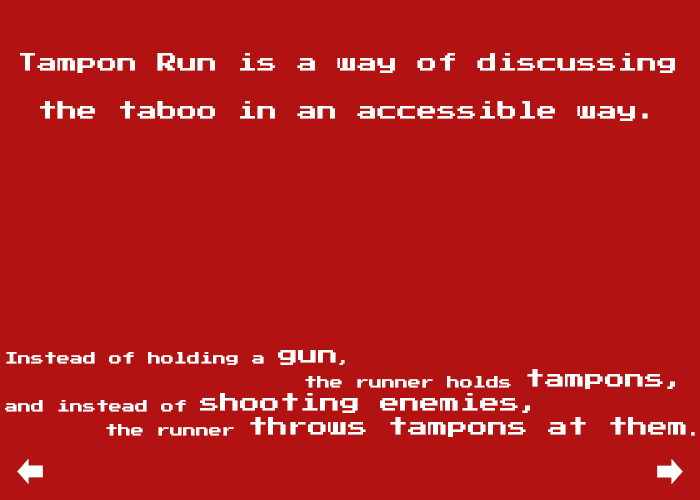
<style>
.page{position:relative;width:700px;height:500px;background:#b21212}
.page>*{position:absolute;margin:0}
.t1{font:20px "PressStart2P";color:#ffffff}
.t2{font:13px "PressStart2P";color:#ffffff}
</style>
<div class="page">
<p class="t1" style="left:20px;top:53px;width:655px;height:68px">Tampon Run is a way of discussing<br><br> the taboo in an accessible way.</p>
<p class="t2" style="left:5px;top:350px;width:690px;height:87px">Instead of holding a <span class="t1">gun</span>, <br>                       the runner holds <span class="t1">tampons,<br></span>and instead of <span class="t1">shooting enemies,<br>     </span>the runner <span class="t1">throws tampons at them</span>.</p>
</div>
